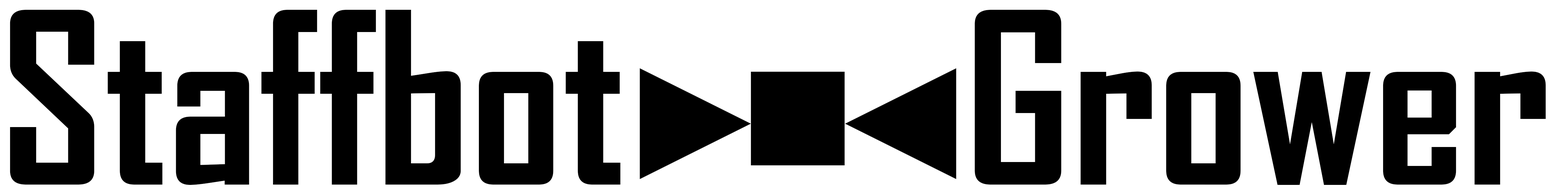
<style>
.page{position:relative;width:1568px;height:196px;background:#ffffff}
.page>*{position:absolute;margin:0}
.t1{font:228.7px "AgencyFB-Bold";color:#000000}
</style>
<div class="page">
<p class="t1" style="left:10px;top:10px;width:611px;height:175px">Staffbot</p>
<p class="t1" style="left:975px;top:10px;width:571px;height:175px">Grower</p>
</div>
